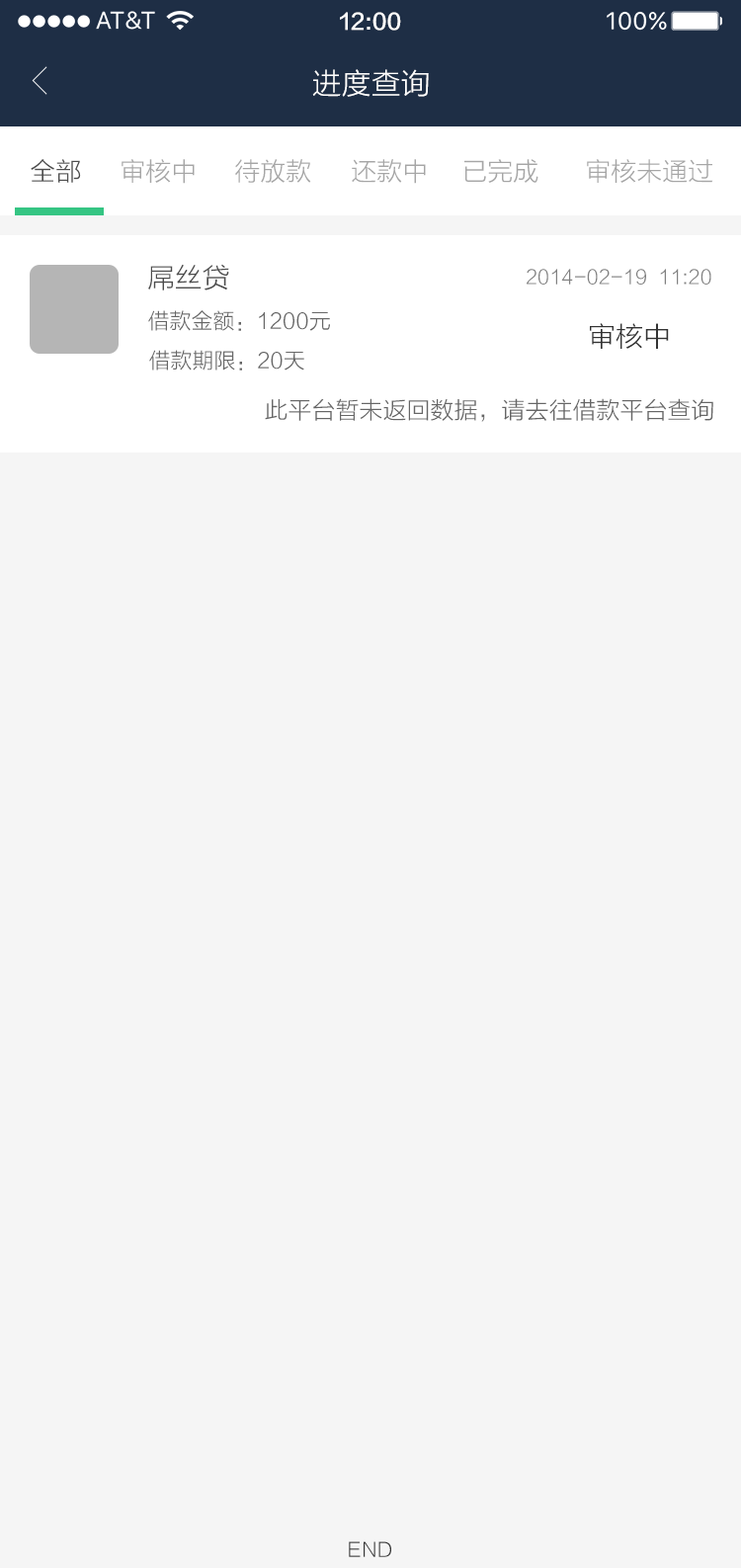
<style>
.page{position:relative;width:741px;height:1568px;background:#f5f5f5}
.page>*{position:absolute;margin:0}
.t1{font:21.7px "FZLTZHK--GBK1-0";color:#ffffff}
.t2{font:29.6px "FZLTXHK";color:#ffffff}
.t3{font:25.7px "FZLTXHK";color:#4d4d4d}
.t4{font:25.7px "FZLTXHK";color:#a6a6a6}
.t5{font:27.7px "FZLTXHK";color:#4d4d4d}
.t6{font:19.8px "FZLTXHK";color:#808080}
.t7{font:21.7px "FZLTXHK";color:#666666}
.t8{font:27.7px "FZLTXHK";color:#333333}
.t9{font:23.7px "FZLTXHK";color:#666666}
.t10{font:19.8px "FZLTXHK";color:#333333}
</style>
<div class="page">
<p class="t1" style="left:340px;top:12px;width:61px;height:19px">12:00</p>
<p class="t2" style="left:312px;top:69px;width:117px;height:28px">进度查询</p>
<p class="t3" style="left:31px;top:159px;width:50px;height:24px">全部</p>
<p class="t4" style="left:122px;top:159px;width:73px;height:25px">审核中</p>
<p class="t4" style="left:235px;top:159px;width:76px;height:24px">待放款</p>
<p class="t4" style="left:352px;top:159px;width:74px;height:25px">还款中</p>
<p class="t4" style="left:464px;top:159px;width:74px;height:24px">已完成</p>
<p class="t4" style="left:587px;top:159px;width:126px;height:24px">审核未通过</p>
<p class="t5" style="left:148px;top:264px;width:81px;height:26px">屌丝贷</p>
<p class="t6" style="left:527px;top:269px;width:184px;height:16px">2014-02-19  11:20</p>
<p class="t7" style="left:148px;top:310px;width:182px;height:21px">借款金额：1200元</p>
<p class="t8" style="left:590px;top:323px;width:79px;height:26px">审核中</p>
<p class="t7" style="left:149px;top:350px;width:155px;height:21px">借款期限：20天</p>
<p class="t9" style="left:265px;top:398px;width:448px;height:24px">此平台暂未返回数据，请去往借款平台查询</p>
<p class="t10" style="left:349px;top:1541px;width:42px;height:16px">END</p>
</div>
